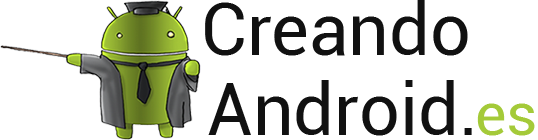
<style>
.page{position:relative;width:538px;height:140px;background:#ffffff}
.page>*{position:absolute;margin:0}
.t1{font:72px "Roboto-Regular";color:#111111}
.t2{font:60px "Roboto-Regular";color:#a4ca39}
</style>
<div class="page">
<p class="t1" style="left:205px;top:0px;width:263px;height:56px">Creando</p>
<p class="t1" style="left:208px;top:80px;width:264px;height:56px">Android.</p>
<p class="t2" style="left:477px;top:103px;width:58px;height:33px">es</p>
</div>
